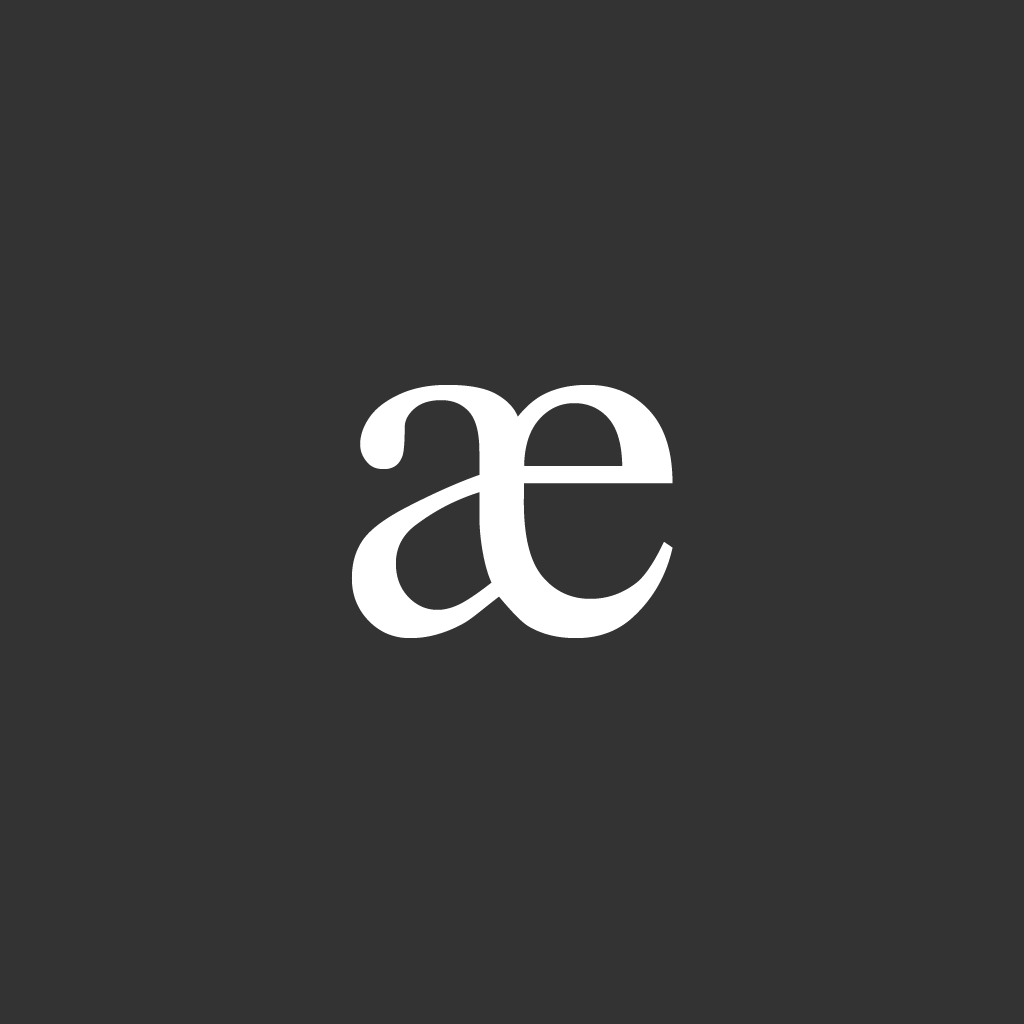
<style>
.page{position:relative;width:1024px;height:1024px;background:#333333}
.page>*{position:absolute;margin:0}
.t1{font:533.3px "TimesNewRomanPSMT";color:#ffffff}
</style>
<div class="page">
<p class="t1" style="left:351px;top:385px;width:322px;height:253px">æ</p>
</div>
